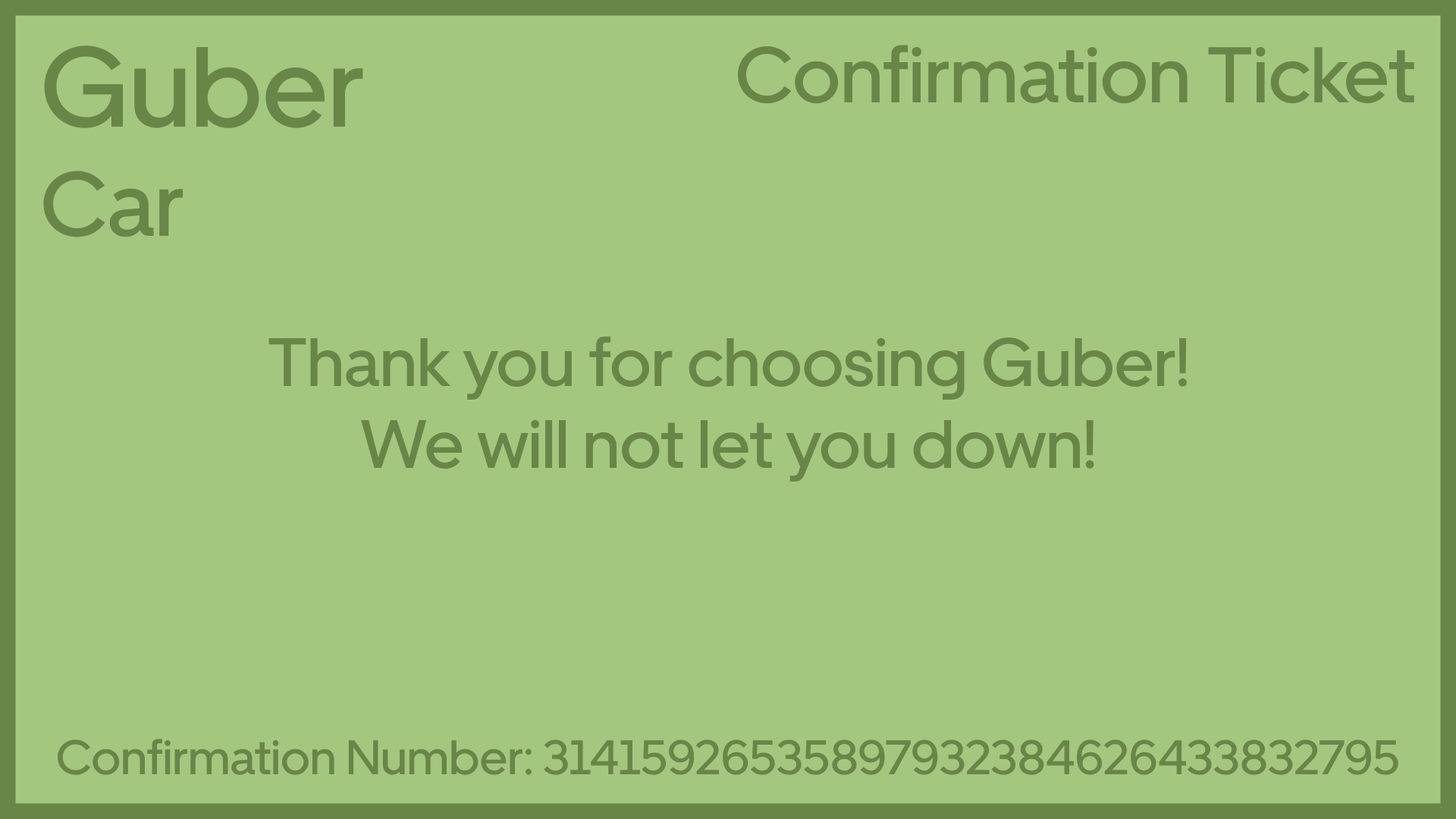
<style>
.page{position:relative;width:1456px;height:819px;background:#a4c77f}
.page>*{position:absolute;margin:0}
.t1{font:113.7px "UberMove-Medium";color:#698649}
.t2{font:91px "UberMove-Medium";color:#698649}
.t3{font:78.9px "UberMove-Medium";color:#698649}
.t4{font:68.2px "UberMove-Medium";color:#698649}
.t5{font:48.5px "UberMove-Medium";color:#698649}
</style>
<div class="page">
<p class="t1" style="left:43px;top:45px;width:320px;height:192px">Guber<br><span class="t2">Car</span></p>
<p class="t3" style="left:738px;top:45px;width:676px;height:59px">Confirmation Ticket</p>
<p class="t4" style="left:268px;top:336px;width:919px;height:146px;text-align:center">Thank you for choosing Guber!<br>We will not let you down!</p>
<p class="t5" style="left:57px;top:739px;width:1341px;height:36px">Confirmation Number: 31415926535897932384626433832795</p>
</div>
